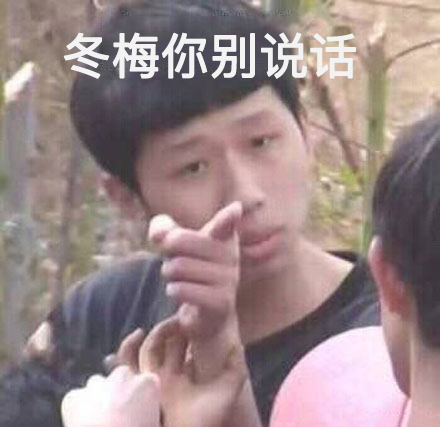
<style>
.page{position:relative;width:440px;height:427px}
.page>*{position:absolute;margin:0}
.t1{font:48px "PingFangSC-Regular";color:#f3f3f3;font-weight:bold}
</style>
<div class="page">
<p class="t1" style="left:63px;top:32px;width:293px;height:47px">冬梅你别说话</p>
</div>
